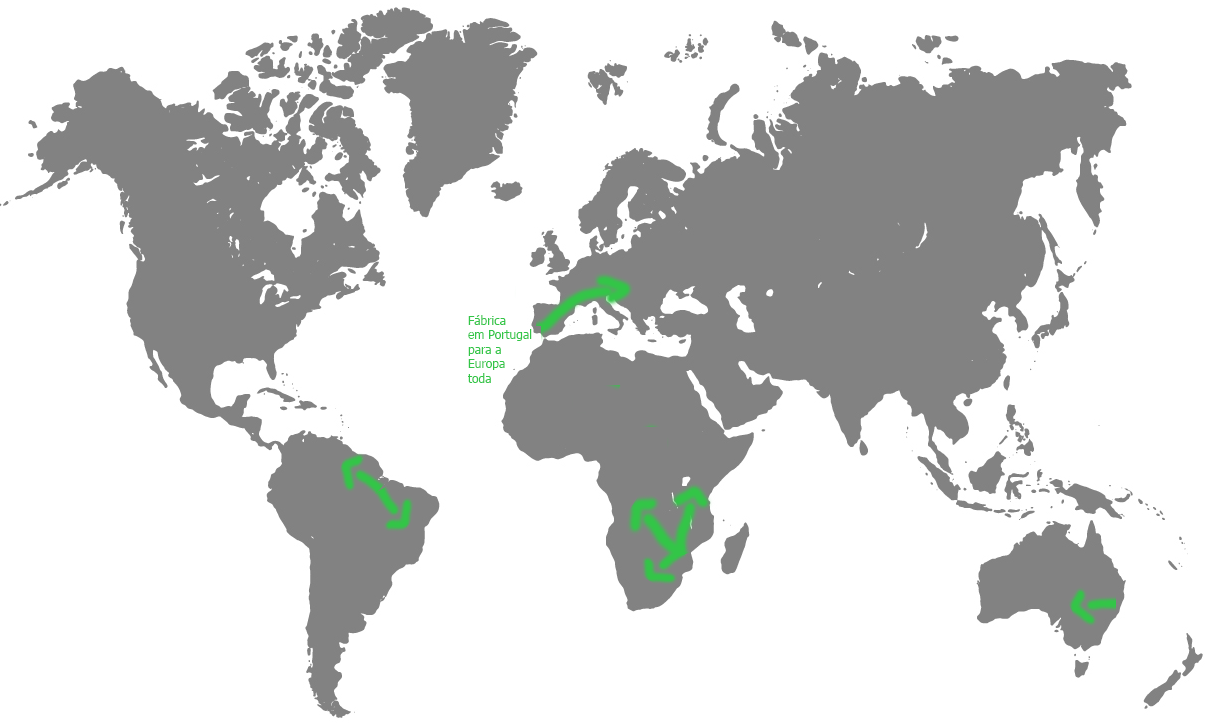
<style>
.page{position:relative;width:1205px;height:723px;background:#ffffff}
.page>*{position:absolute;margin:0}
.t1{font:12px "Tahoma";color:#32c647}
</style>
<div class="page">
<p class="t1" style="left:468px;top:315px;width:64px;height:68px">Fábrica<br>em Portugal<br>para a<br>Europa<br>toda</p>
</div>
